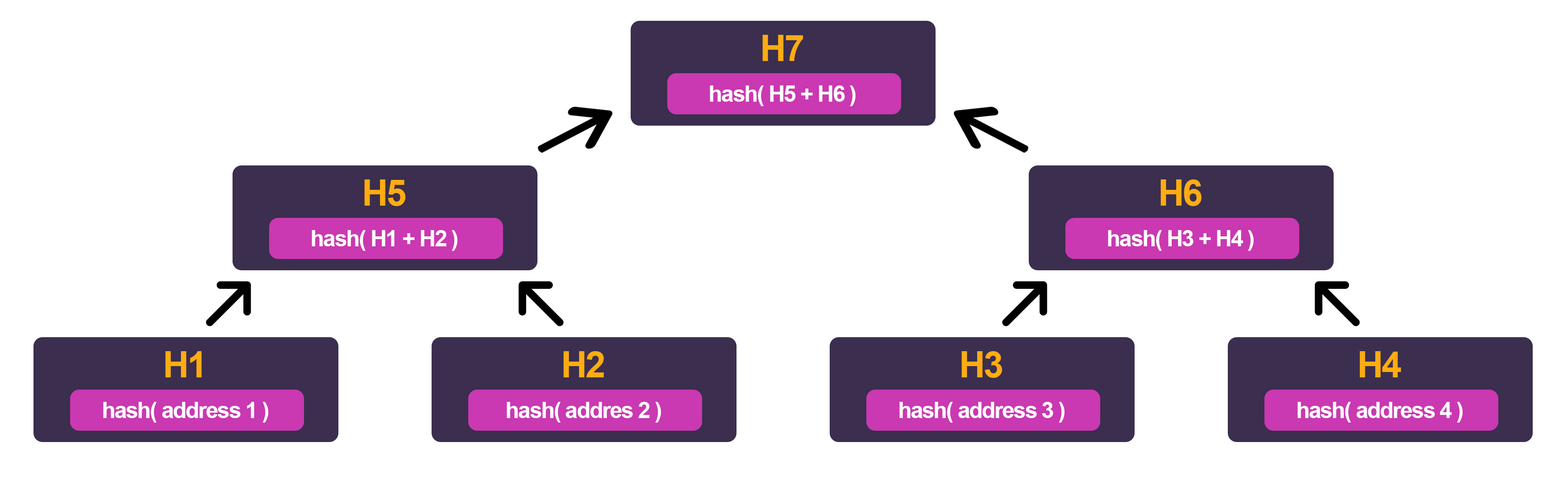
<style>
.page{position:relative;width:1568px;height:480px;background:#ffffff}
.page>*{position:absolute;margin:0}
.t1{font:36.2px "Arial-BoldMT";letter-spacing:-0.05em;color:#ffac11}
.t2{font:22.6px "Arial-BoldMT";letter-spacing:-0.05em;color:#ffffff}
</style>
<div class="page">
<p class="t1" style="left:762px;top:35px;width:41px;height:26px">H7</p>
<p class="t2" style="left:710px;top:86px;width:145px;height:20px">hash( H5 + H6 )</p>
<p class="t1" style="left:364px;top:180px;width:42px;height:26px">H5</p>
<p class="t1" style="left:1160px;top:180px;width:42px;height:26px">H6</p>
<p class="t2" style="left:312px;top:230px;width:145px;height:21px">hash( H1 + H2 )</p>
<p class="t2" style="left:1108px;top:230px;width:146px;height:21px">hash( H3 + H4 )</p>
<p class="t1" style="left:165px;top:352px;width:37px;height:26px">H1</p>
<p class="t1" style="left:563px;top:352px;width:41px;height:26px">H2</p>
<p class="t1" style="left:961px;top:352px;width:41px;height:26px">H3</p>
<p class="t1" style="left:1359px;top:352px;width:42px;height:26px">H4</p>
<p class="t2" style="left:103px;top:402px;width:165px;height:21px">hash( address 1 )</p>
<p class="t2" style="left:507px;top:402px;width:154px;height:21px">hash( addres 2 )</p>
<p class="t2" style="left:899px;top:402px;width:165px;height:21px">hash( address 3 )</p>
<p class="t2" style="left:1297px;top:402px;width:166px;height:21px">hash( address 4 )</p>
</div>
